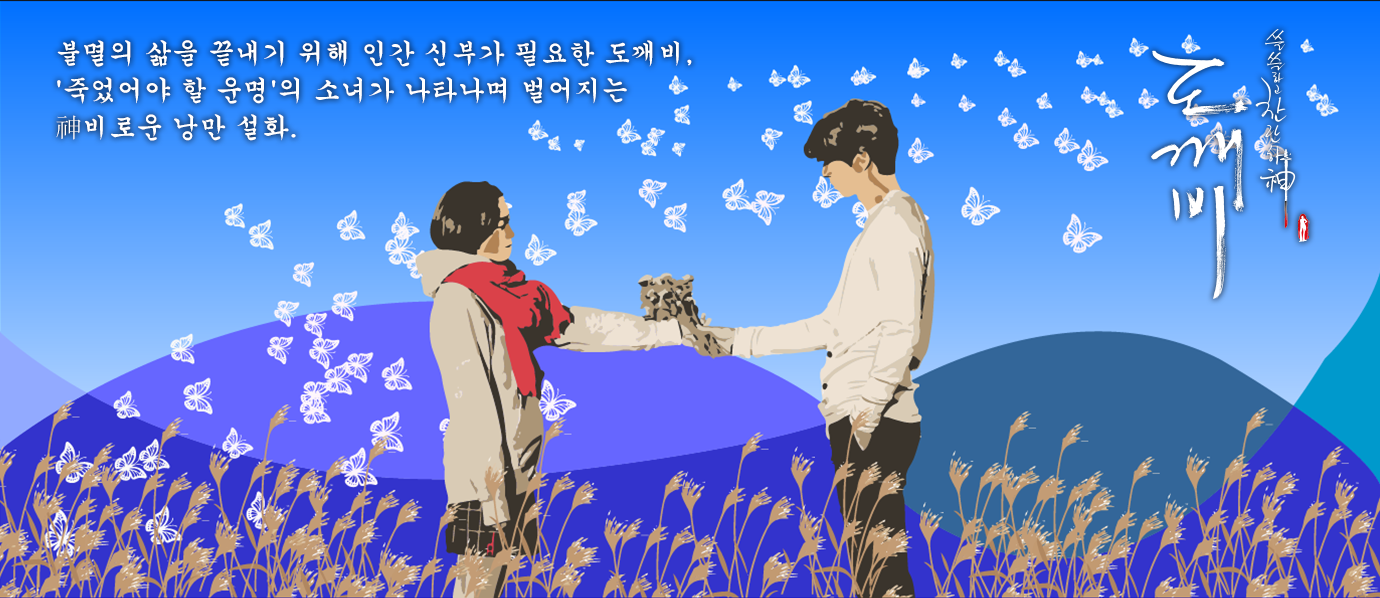
<style>
.page{position:relative;width:1380px;height:598px}
.page>*{position:absolute;margin:0}
.t1{font:27px/37px "Gungsuh";color:#ffffff}
</style>
<div class="page">
<p class="t1" style="left:56px;top:40px;width:636px;height:101px">불멸의 삶을 끝내기 위해 인간 신부가 필요한 도깨비, <br>'죽었어야 할 운명'의 소녀가 나타나며 벌어지는 <br>神비로운 낭만 설화.</p>
</div>
